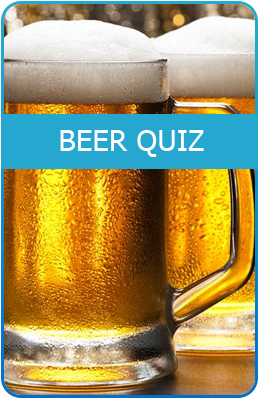
<style>
.page{position:relative;width:260px;height:400px}
.page>*{position:absolute;margin:0}
.t1{font:29.5px "Tahoma";color:#ffffff}
</style>
<div class="page">
<p class="t1" style="left:60px;top:130px;width:144px;height:27px">BEER QUIZ</p>
</div>
